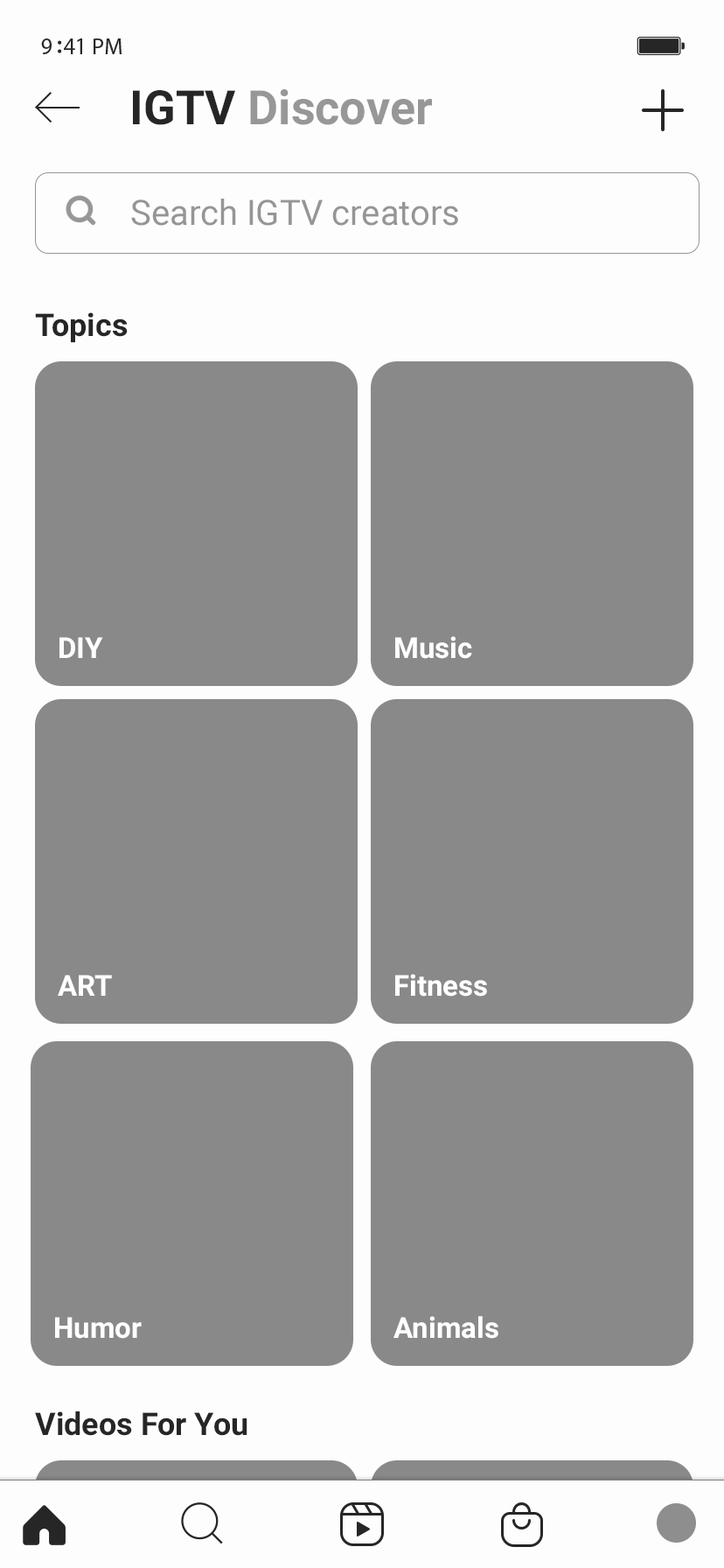
<style>
.page{position:relative;width:724px;height:1568px;background:#898989}
.page>*{position:absolute;margin:0}
.t1{font:47.2px "Roboto-Bold";color:#979797}
.t2{font:47.2px "Roboto-Bold";color:#262626}
.t3{font:35px "Roboto-Regular";color:#959595}
.t4{font:31.5px "Roboto-Bold";color:#262626}
.t5{font:28.9px "Roboto-Bold";color:#ffffff}
</style>
<div class="page">
<p class="t1" style="left:133px;top:89px;width:299px;height:36px"><span class="t2">IGTV </span>Discover</p>
<p class="t3" style="left:131px;top:199px;width:327px;height:27px">Search IGTV creators</p>
<p class="t4" style="left:35px;top:312px;width:93px;height:31px">Topics</p>
<p class="t5" style="left:60px;top:637px;width:43px;height:21px">DIY</p>
<p class="t5" style="left:396px;top:636px;width:76px;height:23px">Music</p>
<p class="t5" style="left:58px;top:975px;width:54px;height:21px">ART</p>
<p class="t5" style="left:396px;top:974px;width:91px;height:23px">Fitness</p>
<p class="t5" style="left:55px;top:1317px;width:87px;height:22px">Humor</p>
<p class="t5" style="left:394px;top:1316px;width:105px;height:23px">Animals</p>
<p class="t4" style="left:35px;top:1411px;width:213px;height:25px">Videos For You</p>
</div>
